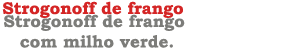
<style>
.page{position:relative;width:300px;height:50px;background:#ffffff}
.page>*{position:absolute;margin:0}
.t1{font:17px "BookmanOldStyle-Bold";color:#d42525}
.t2{font:17px "BookmanOldStyle-Bold";color:#7c7c79}
</style>
<div class="page">
<p class="t1" style="left:2px;top:1px;width:181px;height:17px">Strogonoff de frango</p>
<p class="t2" style="left:4px;top:14px;width:181px;height:34px;text-align:center">Strogonoff de frango <br>com milho verde.</p>
</div>
